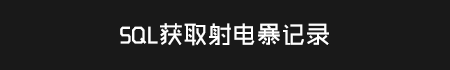
<style>
.page{position:relative;width:450px;height:70px;background:#191919}
.page>*{position:absolute;margin:0}
.t1{font:24px "RTWSShangGoG0v1-Regular";letter-spacing:0.022em;color:#ffffff}
</style>
<div class="page">
<p class="t1" style="left:120px;top:23px;width:209px;height:23px">SQL获取射电暴记录</p>
</div>
